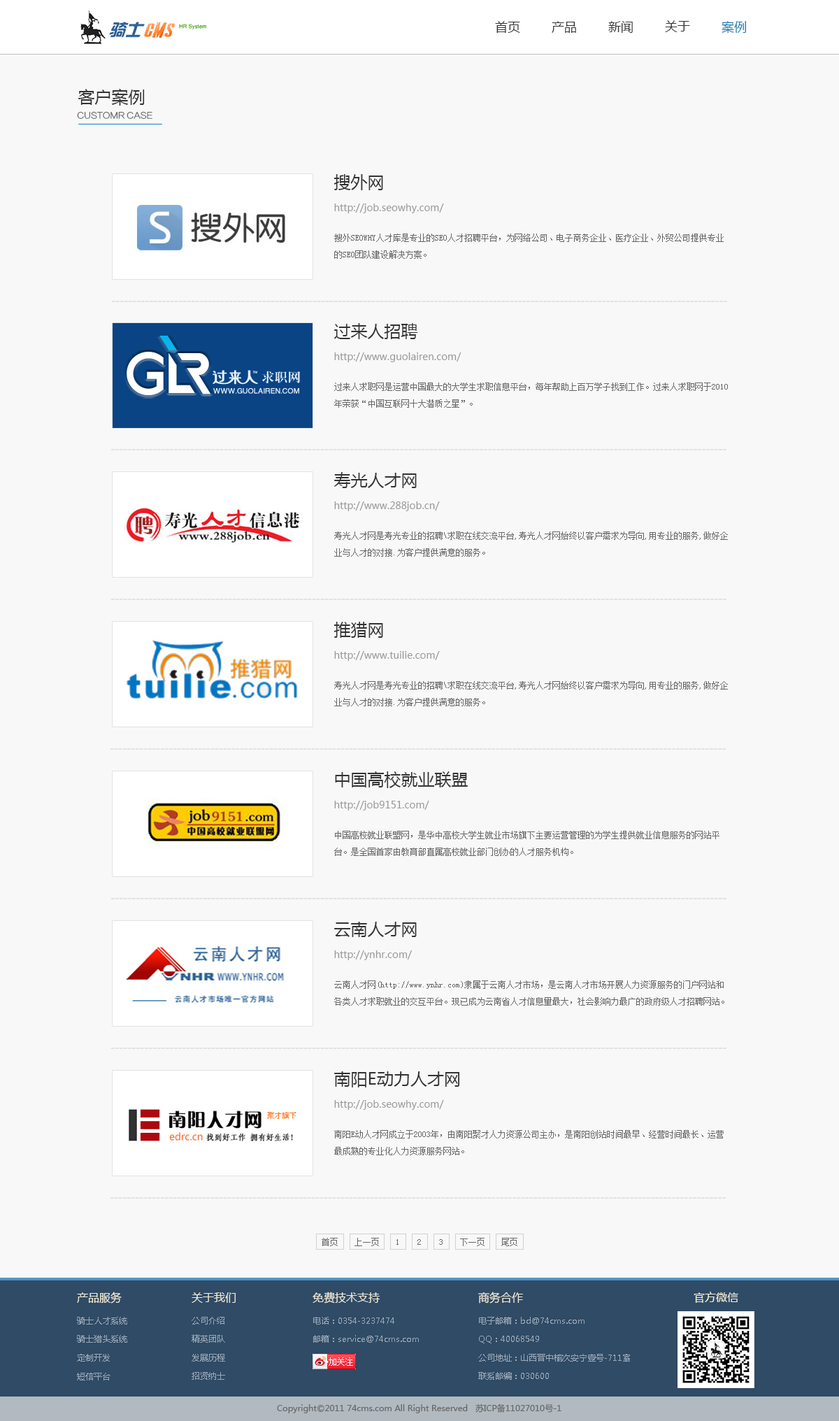
<style>
.page{position:relative;width:839px;height:1421px;background:#f8f8f8}
.page>*{position:absolute;margin:0}
.t1{font:12.6px "MicrosoftYaHei";color:#333333}
.t2{font:12.6px "MicrosoftYaHei";color:#247faf}
.t3{font:16.8px "MicrosoftYaHei";color:#333333}
.t4{font:8.4px "FZLTCXHJW--GB1-0";letter-spacing:-0.05em;color:#666666;font-weight:bold}
.t5{font:9.8px "MicrosoftYaHei";color:#999999}
.t6{font:8.4px/16.8px "SimSun";color:#666666}
.t7{font:12.6px "ArialMT";color:#e2e2e2}
.t8{font:8.4px "SimSun";color:#666666}
.t9{font:11.2px "MicrosoftYaHei";color:#f6eed7}
.t10{font:8.4px "MicrosoftYaHei";color:#9da9b7}
.t11{font:8.4px "MicrosoftYaHei";color:#666666}
</style>
<div class="page">
<p class="t1" style="left:495px;top:21px;width:25px;height:12px">首页</p>
<p class="t1" style="left:552px;top:21px;width:24px;height:12px">产品</p>
<p class="t1" style="left:608px;top:21px;width:25px;height:12px">新闻</p>
<p class="t1" style="left:665px;top:20px;width:25px;height:12px">关于</p>
<p class="t2" style="left:722px;top:21px;width:25px;height:13px">案例</p>
<p class="t3" style="left:78px;top:89px;width:67px;height:17px">客户案例</p>
<p class="t4" style="left:77px;top:111px;width:75px;height:8px">CUSTOMR CASE</p>
<p class="t3" style="left:334px;top:174px;width:49px;height:16px">搜外网</p>
<p class="t5" style="left:334px;top:203px;width:110px;height:10px">http://job.seowhy.com/</p>
<p class="t6" style="left:334px;top:234px;width:390px;height:25px">搜外SEOWHY人才库是专业的SEO人才招聘平台，为网络公司、电子商务企业、医疗企业、外贸公司提供专业的SEO团队建设解决方案。</p>
<p class="t7" style="left:111px;top:301px;width:616px;height:1px">---------------------------------------------------------------------------------------------------------------------------------------------------</p>
<p class="t3" style="left:334px;top:323px;width:84px;height:16px">过来人招聘</p>
<p class="t5" style="left:334px;top:352px;width:128px;height:10px">http://www.guolairen.com/</p>
<p class="t6" style="left:334px;top:383px;width:394px;height:25px">过来人求职网是运营中国最大的大学生求职信息平台，每年帮助上百万学子找到工作。过来人求职网于2010年荣获“中国互联网十大潜质之星”。</p>
<p class="t7" style="left:110px;top:449px;width:617px;height:1px">---------------------------------------------------------------------------------------------------------------------------------------------------</p>
<p class="t3" style="left:334px;top:472px;width:83px;height:16px">寿光人才网</p>
<p class="t5" style="left:334px;top:501px;width:106px;height:10px">http://www.288job.cn/</p>
<p class="t6" style="left:334px;top:531px;width:394px;height:26px">寿光人才网是寿光专业的招聘\求职在线交流平台,寿光人才网始终以客户需求为导向,用专业的服务,做好企业与人才的对接.为客户提供满意的服务。</p>
<p class="t7" style="left:110px;top:599px;width:617px;height:1px">---------------------------------------------------------------------------------------------------------------------------------------------------</p>
<p class="t3" style="left:334px;top:622px;width:49px;height:16px">推猎网</p>
<p class="t5" style="left:334px;top:651px;width:106px;height:10px">http://www.tuilie.com/</p>
<p class="t6" style="left:334px;top:681px;width:394px;height:25px">寿光人才网是寿光专业的招聘\求职在线交流平台,寿光人才网始终以客户需求为导向,用专业的服务,做好企业与人才的对接.为客户提供满意的服务。</p>
<p class="t7" style="left:110px;top:748px;width:616px;height:2px">---------------------------------------------------------------------------------------------------------------------------------------------------</p>
<p class="t3" style="left:335px;top:771px;width:133px;height:17px">中国高校就业联盟</p>
<p class="t5" style="left:334px;top:801px;width:95px;height:9px">http://job9151.com/</p>
<p class="t6" style="left:334px;top:831px;width:386px;height:25px">中国高校就业联盟网，是华中高校大学生就业市场旗下主要运营管理的为学生提供就业信息服务的网站平台。是全国首家由教育部直属高校就业部门创办的人才服务机构。</p>
<p class="t7" style="left:110px;top:898px;width:617px;height:1px">---------------------------------------------------------------------------------------------------------------------------------------------------</p>
<p class="t3" style="left:334px;top:922px;width:83px;height:15px">云南人才网</p>
<p class="t5" style="left:334px;top:950px;width:78px;height:10px">http://ynhr.com/</p>
<p class="t6" style="left:334px;top:980px;width:390px;height:26px">云南人才网(http://www.ynhr.com)隶属于云南人才市场，是云南人才市场开展人力资源服务的门户网站和各类人才求职就业的交互平台。现已成为云南省人才信息量最大，社会影响力最广的政府级人才招聘网站。</p>
<p class="t7" style="left:110px;top:1048px;width:617px;height:1px">---------------------------------------------------------------------------------------------------------------------------------------------------</p>
<p class="t3" style="left:334px;top:1071px;width:125px;height:16px">南阳E动力人才网</p>
<p class="t5" style="left:334px;top:1100px;width:110px;height:10px">http://job.seowhy.com/</p>
<p class="t6" style="left:334px;top:1130px;width:390px;height:25px">南阳E动人才网成立于2003年，由南阳聚才人力资源公司主办，是南阳创站时间最早、经营时间最长、运营最成熟的专业化人力资源服务网站。</p>
<p class="t7" style="left:110px;top:1197px;width:616px;height:2px">---------------------------------------------------------------------------------------------------------------------------------------------------</p>
<p class="t8" style="left:322px;top:1238px;width:16px;height:8px">首页</p>
<p class="t8" style="left:355px;top:1238px;width:24px;height:8px">上一页</p>
<p class="t8" style="left:397px;top:1239px;width:2px;height:6px">1</p>
<p class="t8" style="left:417px;top:1239px;width:4px;height:6px">2</p>
<p class="t8" style="left:439px;top:1239px;width:4px;height:6px">3</p>
<p class="t8" style="left:460px;top:1238px;width:25px;height:8px">下一页</p>
<p class="t8" style="left:501px;top:1238px;width:16px;height:8px">尾页</p>
<p class="t9" style="left:77px;top:1292px;width:45px;height:11px">产品服务</p>
<p class="t9" style="left:192px;top:1292px;width:44px;height:11px">关于我们</p>
<p class="t9" style="left:313px;top:1292px;width:67px;height:11px">免费技术支持</p>
<p class="t9" style="left:478px;top:1292px;width:45px;height:11px">商务合作</p>
<p class="t9" style="left:694px;top:1292px;width:44px;height:11px">官方微信</p>
<p class="t10" style="left:77px;top:1317px;width:50px;height:7px">骑士人才系统</p>
<p class="t10" style="left:192px;top:1317px;width:32px;height:7px">公司介绍</p>
<p class="t10" style="left:313px;top:1317px;width:81px;height:7px">电话：0354-3237474</p>
<p class="t10" style="left:479px;top:1317px;width:106px;height:7px">电子邮箱：bd@74cms.com</p>
<p class="t10" style="left:77px;top:1335px;width:50px;height:8px">骑士猎头系统</p>
<p class="t10" style="left:192px;top:1334px;width:33px;height:9px">精英团队</p>
<p class="t10" style="left:313px;top:1335px;width:106px;height:8px">邮箱：service@74cms.com</p>
<p class="t10" style="left:479px;top:1336px;width:60px;height:7px">QQ：40068549</p>
<p class="t10" style="left:77px;top:1354px;width:33px;height:8px">定制开发</p>
<p class="t10" style="left:192px;top:1354px;width:33px;height:8px">发展历程</p>
<p class="t10" style="left:478px;top:1354px;width:152px;height:8px">公司地址：山西晋中榆次安宁壹号-711室</p>
<p class="t10" style="left:77px;top:1373px;width:33px;height:7px">短信平台</p>
<p class="t10" style="left:192px;top:1372px;width:33px;height:8px">招贤纳士</p>
<p class="t10" style="left:478px;top:1372px;width:71px;height:8px">联系邮编：030600</p>
<p class="t11" style="left:277px;top:1403px;width:285px;height:10px">Copyright©2011 74cms.com All Right Reserved   苏ICP备11027010号-1</p>
</div>
